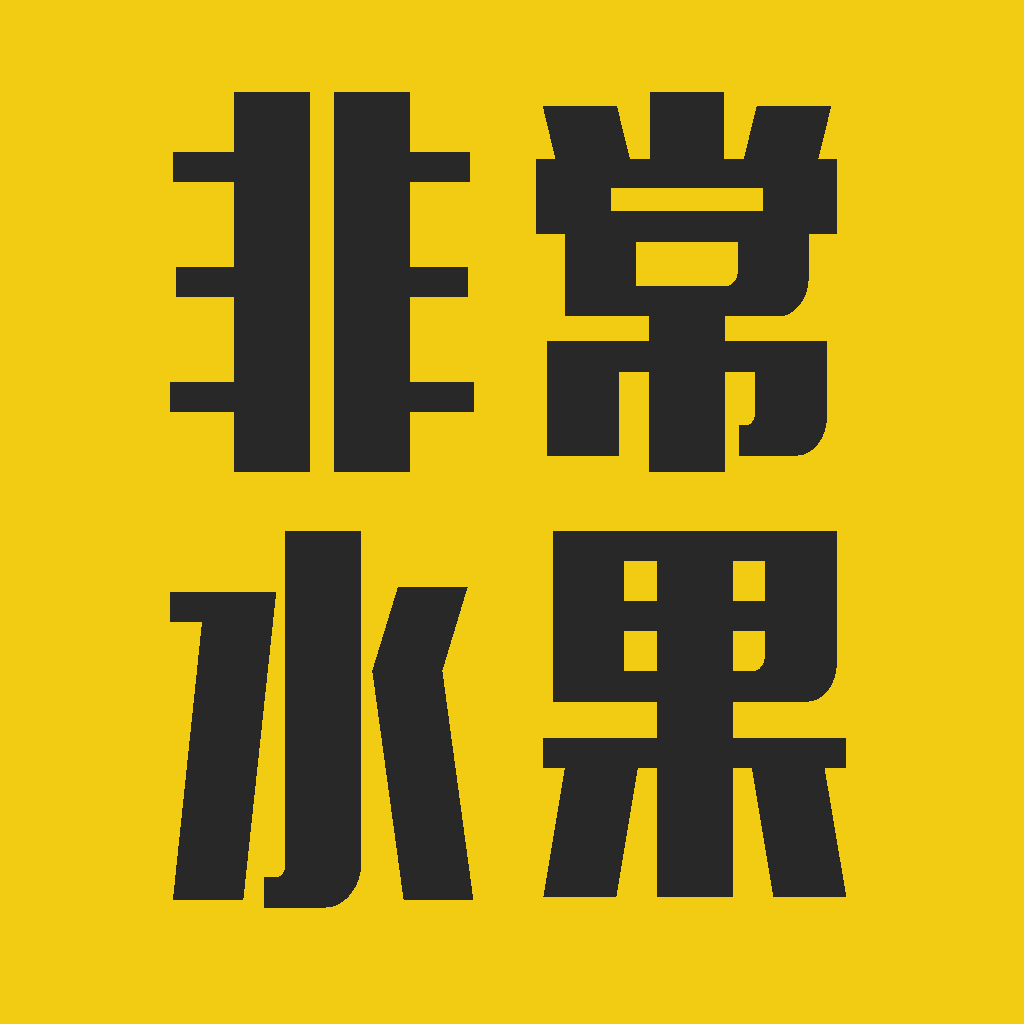
<style>
.page{position:relative;width:1024px;height:1024px;background:#f2cc13}
.page>*{position:absolute;margin:0}
.t1{font:400px "MFLiHei_Noncommercial-Regular";color:#282828;scale:0.8 1}
</style>
<div class="page">
<p class="t1" style="left:170px;top:92px;width:304px;height:380px">非</p>
<p class="t1" style="left:536px;top:92px;width:301px;height:380px">常</p>
<p class="t1" style="left:170px;top:531px;width:303px;height:377px">水</p>
<p class="t1" style="left:543px;top:531px;width:303px;height:366px">果</p>
</div>
